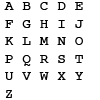
<style>
.page{position:relative;width:100px;height:100px;background:#ffffff}
.page>*{position:absolute;margin:0}
.t1{font:14.6px "Courier";color:#010101}
</style>
<div class="page">
<p class="t1" style="left:4px;top:2px;width:80px;height:96px">A B C D E <br>F G H I J <br>K L M N O <br>P Q R S T<br>U V W X Y<br>Z</p>
</div>
